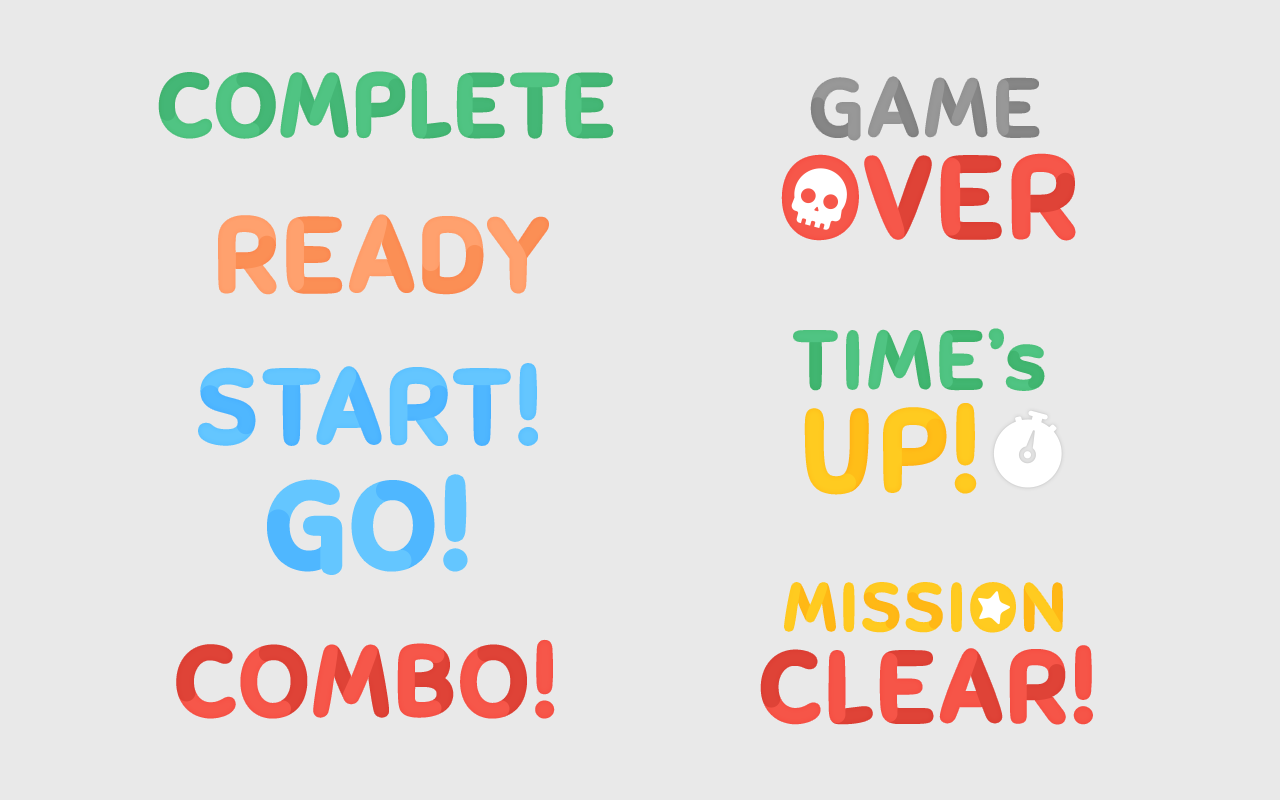
<style>
.page{position:relative;width:1280px;height:800px;background:#e9e9e9}
.page>*{position:absolute;margin:0}
.t1{font:83.6px "Sniglet-Regular";letter-spacing:0.06em;color:#50c483;text-transform:uppercase;font-weight:bold;scale:1.05 1}
.t2{font:78.5px "Sniglet-Regular";letter-spacing:0.06em;color:#959595;font-weight:bold;scale:1.06 1}
.t3{font:109.2px "Sniglet-Regular";letter-spacing:0.06em;color:#f6574a;text-transform:uppercase;font-weight:bold;scale:1.05 1}
.t4{font:99.3px "Sniglet-Regular";letter-spacing:0.06em;color:#ffa16e;text-transform:uppercase;font-weight:bold;scale:1.05 1}
.t5{font:78.5px "Sniglet-Regular";letter-spacing:0.06em;color:#4ec280;text-transform:uppercase;font-weight:bold;scale:1.06 1}
.t6{font:78.5px "Sniglet-Regular";letter-spacing:0.06em;color:#4ec280;font-weight:bold;scale:1.06 1}
.t7{font:99.3px "Sniglet-Regular";letter-spacing:0.06em;color:#64c6ff;text-transform:uppercase;font-weight:bold;scale:1.05 1}
.t8{font:109.2px "Sniglet-Regular";letter-spacing:0.06em;color:#ffcb20;text-transform:uppercase;font-weight:bold;scale:1.05 1}
.t9{font:115px "Sniglet-Regular";letter-spacing:0.06em;color:#64c6ff;text-transform:uppercase;font-weight:bold;scale:1.05 1}
.t10{font:64.8px "Sniglet-Regular";letter-spacing:0.06em;color:#ffca1f;text-transform:uppercase;font-weight:bold;scale:1.06 1}
.t11{font:94.1px "Sniglet-Regular";letter-spacing:0.06em;color:#f6574a;text-transform:uppercase;font-weight:bold;scale:1.05 1}
.t12{font:94.6px "Sniglet-Regular";letter-spacing:0.06em;text-transform:uppercase;font-weight:bold;scale:1.05 1}
</style>
<div class="page">
<p class="t1" style="left:160px;top:73px;width:452px;height:64px">Complete</p>
<p class="t2" style="left:811px;top:77px;width:228px;height:63px">GAME</p>
<p class="t3" style="left:783px;top:155px;width:291px;height:84px">over</p>
<p class="t4" style="left:220px;top:216px;width:327px;height:77px">READY</p>
<p class="t5" style="left:794px;top:329px;width:250px;height:61px">Time<span class="t6">’s</span></p>
<p class="t7" style="left:200px;top:365px;width:336px;height:79px">Start!</p>
<p class="t8" style="left:806px;top:405px;width:169px;height:88px">UP!</p>
<p class="t9" style="left:270px;top:477px;width:195px;height:95px">GO!</p>
<p class="t10" style="left:785px;top:583px;width:277px;height:49px">Mission</p>
<p class="t11" style="left:178px;top:641px;width:375px;height:76px">COMBO!</p>
<p class="t12" style="left:762px;top:647px;width:329px;height:76px">CLEAR!</p>
</div>
